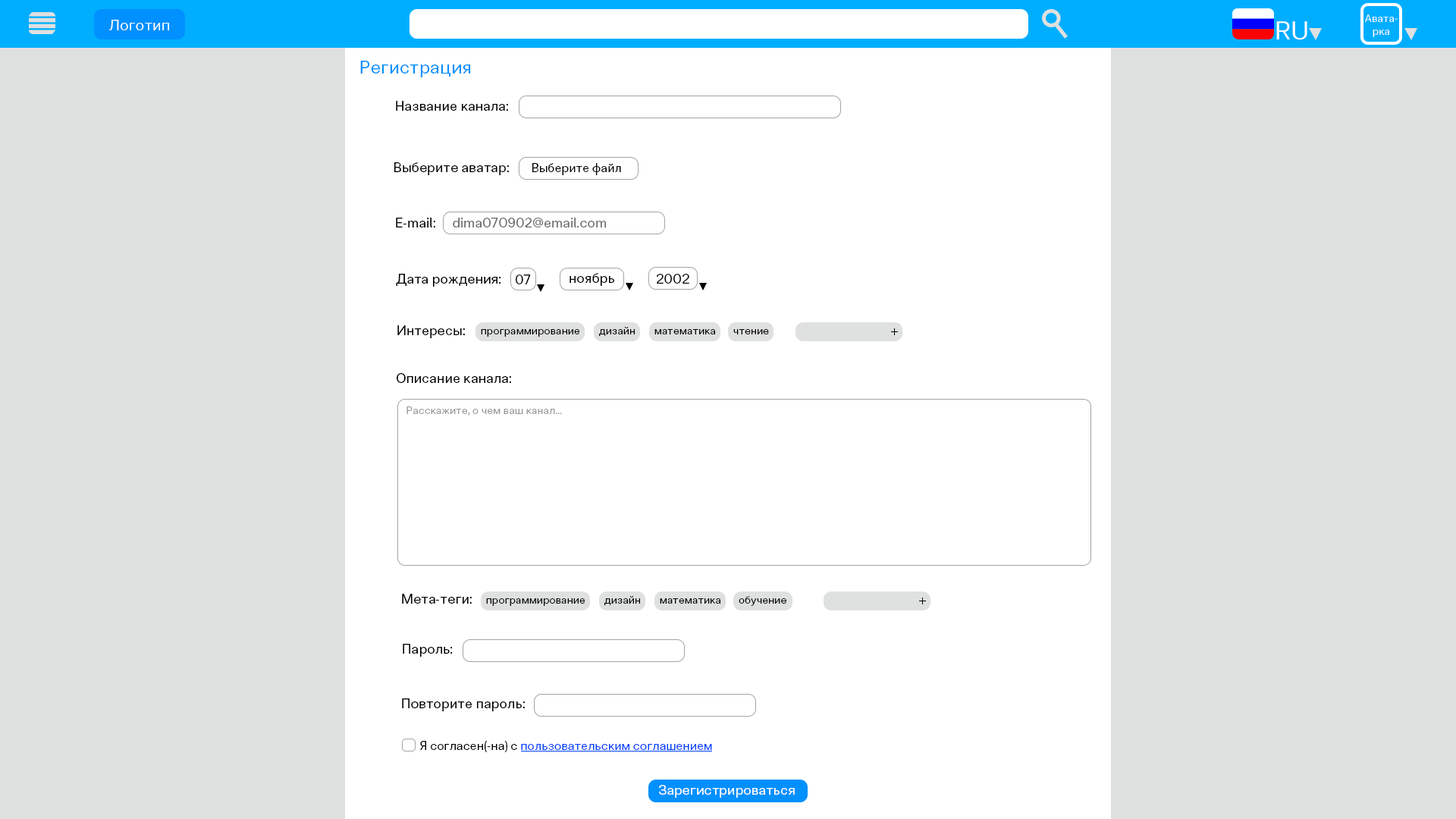
<style>
.page{position:relative;width:1456px;height:819px;background:#ffffff}
.page>*{position:absolute;margin:0}
.t1{font:10.6px "ClinicaPro-Regular";color:#ffffff}
.t2{font:15.2px "ClinicaPro-Regular";color:#ffffff}
.t3{font:25.8px "ClinicaPro-Regular";color:#ffffff}
.t4{font:18.2px "ClinicaPro-Regular";color:#0090ff}
.t5{font:13.6px "ClinicaPro-Regular";color:#000000}
.t6{font:12.1px "ClinicaPro-Regular";color:#000000}
.t7{font:13.6px "ClinicaPro-Regular";color:#6c6c6c}
.t8{font:10.6px "ClinicaPro-Regular";color:#000000}
.t9{font:10.6px "ClinicaPro-Regular";color:#9a9a9a}
.t10{font:12.1px "ClinicaPro-Regular";color:#0042ff}
.t11{font:13.6px "ClinicaPro-Regular";color:#ffffff}
</style>
<div class="page">
<p class="t1" style="left:1365px;top:14px;width:33px;height:23px;text-align:center">Авата-<br>рка</p>
<p class="t2" style="left:109px;top:20px;width:60px;height:10px">Логотип</p>
<p class="t3" style="left:1276px;top:21px;width:31px;height:19px">RU</p>
<p class="t4" style="left:360px;top:61px;width:111px;height:16px">Регистрация</p>
<p class="t5" style="left:396px;top:101px;width:112px;height:10px">Название канала:</p>
<p class="t5" style="left:394px;top:162px;width:115px;height:13px">Выберите аватар:</p>
<p class="t6" style="left:532px;top:163px;width:89px;height:12px">Выберите файл</p>
<p class="t5" style="left:396px;top:218px;width:39px;height:9px">E-mail:</p>
<p class="t7" style="left:453px;top:218px;width:153px;height:9px">dima070902@email.com</p>
<p class="t5" style="left:396px;top:274px;width:104px;height:13px">Дата рождения:</p>
<p class="t5" style="left:516px;top:275px;width:15px;height:9px">07</p>
<p class="t5" style="left:570px;top:273px;width:44px;height:13px">ноябрь</p>
<p class="t5" style="left:657px;top:274px;width:32px;height:10px">2002</p>
<p class="t5" style="left:397px;top:325px;width:68px;height:13px">Интересы:</p>
<p class="t8" style="left:481px;top:329px;width:98px;height:8px">программирование</p>
<p class="t8" style="left:599px;top:327px;width:36px;height:10px">дизайн</p>
<p class="t8" style="left:654px;top:329px;width:61px;height:5px">математика</p>
<p class="t8" style="left:733px;top:329px;width:36px;height:5px">чтение</p>
<p class="t5" style="left:397px;top:373px;width:114px;height:10px">Описание канала:</p>
<p class="t9" style="left:406px;top:406px;width:156px;height:10px">Расскажите, о чем ваш канал...</p>
<p class="t5" style="left:402px;top:594px;width:70px;height:10px">Мета-теги:</p>
<p class="t8" style="left:486px;top:598px;width:99px;height:8px">программирование</p>
<p class="t8" style="left:604px;top:596px;width:36px;height:10px">дизайн</p>
<p class="t8" style="left:660px;top:598px;width:60px;height:6px">математика</p>
<p class="t8" style="left:739px;top:596px;width:47px;height:10px">обучение</p>
<p class="t5" style="left:403px;top:644px;width:49px;height:13px">Пароль:</p>
<p class="t5" style="left:402px;top:698px;width:123px;height:13px">Повторите пароль:</p>
<p class="t10" style="left:420px;top:740px;width:292px;height:12px"><span class="t6">Я согласен(-на) с </span>пользовательским соглашением</p>
<p class="t11" style="left:659px;top:785px;width:136px;height:13px">Зарегистрироваться</p>
</div>
